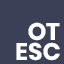
<style>
.page{position:relative;width:64px;height:64px;background:#3b4057}
.page>*{position:absolute;margin:0}
.t1{font:24px "Poppins-Bold";color:#ffffff}
</style>
<div class="page">
<p class="t1" style="left:28px;top:22px;width:32px;height:19px">OT</p>
<p class="t1" style="left:16px;top:42px;width:44px;height:19px">ESC</p>
</div>
